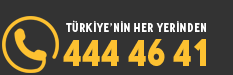
<style>
.page{position:relative;width:233px;height:75px;background:#333333}
.page>*{position:absolute;margin:0}
.t1{font:12.6px "Novecento-CondDemiBold";letter-spacing:0.031em;color:#ffffff}
.t2{font:37.9px "Novecento-CondUltraBold";color:#fdc131}
</style>
<div class="page">
<p class="t1" style="left:66px;top:20px;width:140px;height:12px">TÜRKİYE’NİN HER YERİNDEN</p>
<p class="t2" style="left:63px;top:39px;width:143px;height:27px">444 46 41</p>
</div>
